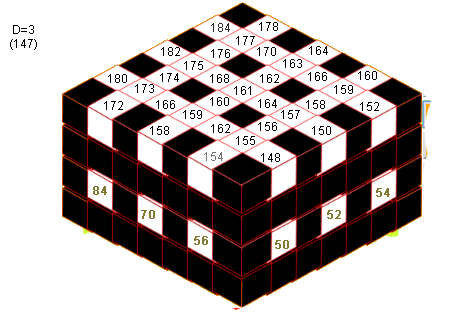
<style>
.page{position:relative;width:465px;height:322px;background:#ffffff}
.page>*{position:absolute;margin:0}
.t1{font:12px "ArialMT";color:#000000}
.t2{font:12px "ArialMT";color:#292929}
.t3{font:12px "ArialMT";color:#737373}
.t4{font:12px "ArialMT";color:#817931;font-weight:bold}
</style>
<div class="page">
<p class="t1" style="left:10px;top:25px;width:27px;height:25px;text-align:center">D=3<br>(147)</p>
<p class="t2" style="left:211px;top:23px;width:19px;height:9px">184</p>
<p class="t1" style="left:259px;top:22px;width:19px;height:9px">178</p>
<p class="t1" style="left:236px;top:36px;width:19px;height:9px">177</p>
<p class="t1" style="left:161px;top:47px;width:19px;height:9px">182</p>
<p class="t1" style="left:211px;top:49px;width:19px;height:9px">176</p>
<p class="t1" style="left:257px;top:47px;width:19px;height:9px">170</p>
<p class="t1" style="left:309px;top:46px;width:19px;height:9px">164</p>
<p class="t1" style="left:184px;top:61px;width:19px;height:9px">175</p>
<p class="t1" style="left:283px;top:59px;width:19px;height:9px">163</p>
<p class="t1" style="left:108px;top:74px;width:19px;height:9px">180</p>
<p class="t1" style="left:160px;top:73px;width:19px;height:9px">174</p>
<p class="t1" style="left:210px;top:74px;width:19px;height:9px">168</p>
<p class="t1" style="left:260px;top:74px;width:19px;height:9px">162</p>
<p class="t1" style="left:308px;top:72px;width:19px;height:9px">166</p>
<p class="t1" style="left:358px;top:71px;width:19px;height:9px">160</p>
<p class="t1" style="left:135px;top:84px;width:19px;height:9px">173</p>
<p class="t1" style="left:234px;top:86px;width:17px;height:9px">161</p>
<p class="t1" style="left:334px;top:85px;width:19px;height:9px">159</p>
<p class="t1" style="left:104px;top:101px;width:19px;height:9px">172</p>
<p class="t1" style="left:156px;top:100px;width:19px;height:9px">166</p>
<p class="t1" style="left:210px;top:97px;width:19px;height:9px">160</p>
<p class="t1" style="left:258px;top:99px;width:19px;height:9px">164</p>
<p class="t1" style="left:306px;top:100px;width:19px;height:9px">158</p>
<p class="t1" style="left:360px;top:102px;width:19px;height:9px">152</p>
<p class="t1" style="left:183px;top:110px;width:19px;height:9px">159</p>
<p class="t1" style="left:281px;top:110px;width:19px;height:9px">157</p>
<p class="t1" style="left:150px;top:126px;width:19px;height:9px">158</p>
<p class="t1" style="left:211px;top:124px;width:19px;height:9px">162</p>
<p class="t1" style="left:258px;top:122px;width:19px;height:9px">156</p>
<p class="t1" style="left:312px;top:126px;width:19px;height:9px">150</p>
<p class="t1" style="left:236px;top:136px;width:19px;height:9px">155</p>
<p class="t3" style="left:204px;top:152px;width:19px;height:9px">154</p>
<p class="t1" style="left:261px;top:153px;width:19px;height:9px">148</p>
<p class="t4" style="left:93px;top:186px;width:14px;height:9px">84</p>
<p class="t4" style="left:376px;top:188px;width:14px;height:9px">54</p>
<p class="t4" style="left:141px;top:210px;width:14px;height:9px">70</p>
<p class="t4" style="left:327px;top:210px;width:14px;height:9px">52</p>
<p class="t4" style="left:194px;top:236px;width:14px;height:9px">56</p>
<p class="t4" style="left:275px;top:240px;width:14px;height:9px">50</p>
</div>
